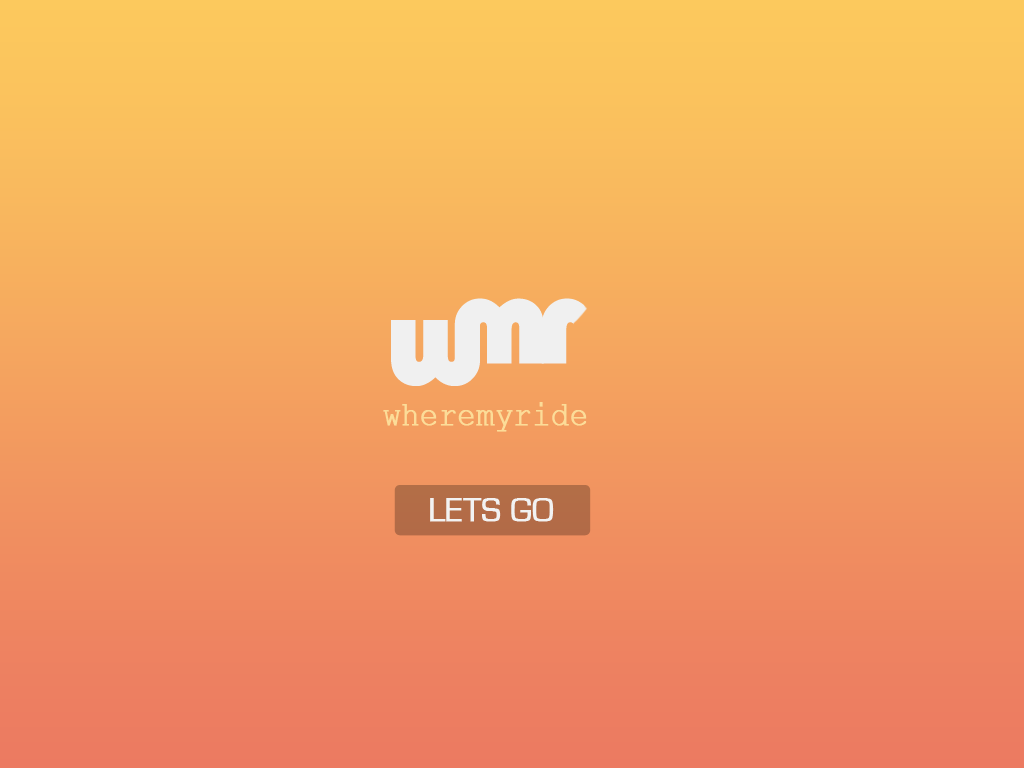
<style>
.page{position:relative;width:1024px;height:768px}
.page>*{position:absolute;margin:0}
.t1{font:33.7px "CourierNewPSMT";color:#fcdc98;font-weight:bold;scale:0.88 1}
.t2{font:33.7px "EurostileRegular";color:#f2f2f2;font-weight:bold}
</style>
<div class="page">
<p class="t1" style="left:383px;top:402px;width:204px;height:30px">wheremyride</p>
<p class="t2" style="left:430px;top:498px;width:124px;height:24px">LETS GO</p>
</div>
